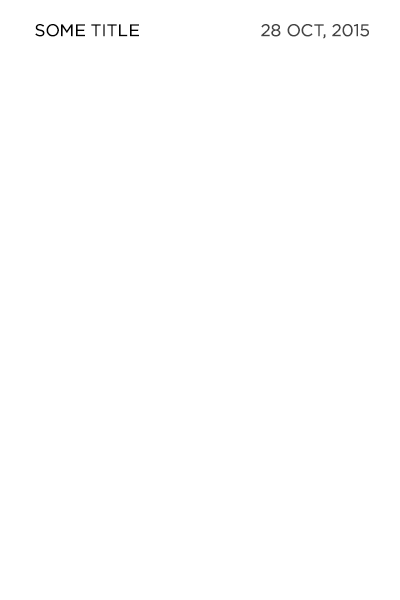
<style>
.page{position:relative;width:400px;height:600px;background:#ffffff}
.page>*{position:absolute;margin:0}
.t1{font:17px "GothamHTF-Book";color:#000000}
.t2{font:17px "GothamHTF-Book";color:#444444}
</style>
<div class="page">
<p class="t1" style="left:35px;top:24px;width:104px;height:13px">SOME TITLE</p>
<p class="t2" style="left:261px;top:24px;width:108px;height:15px">28 OCT, 2015</p>
</div>
